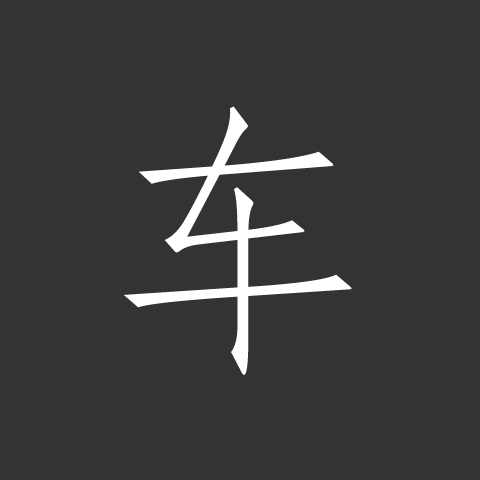
<style>
.page{position:relative;width:480px;height:480px;background:#333333}
.page>*{position:absolute;margin:0}
.t1{font:288px "STFangsong";color:#ffffff}
</style>
<div class="page">
<p class="t1" style="left:124px;top:106px;width:228px;height:269px">车</p>
</div>
